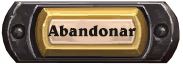
<style>
.page{position:relative;width:183px;height:64px}
.page>*{position:absolute;margin:0}
.t1{font:16px "BelweBT-Bold";color:#191714}
</style>
<div class="page">
<p class="t1" style="left:48px;top:25px;width:88px;height:12px">Abandonar</p>
</div>
